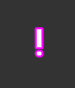
<style>
.page{position:relative;width:75px;height:88px;background:#333333}
.page>*{position:absolute;margin:0}
.t1{font:41.7px "Electrofied";letter-spacing:0.075em;font-weight:bold}
</style>
<div class="page">
<p class="t1" style="left:35px;top:28px;width:8px;height:29px">!</p>
</div>
